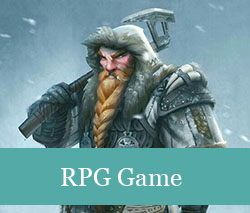
<style>
.page{position:relative;width:250px;height:213px}
.page>*{position:absolute;margin:0}
.t1{font:25px "Georgia";color:#ffffff}
</style>
<div class="page">
<p class="t1" style="left:61px;top:168px;width:121px;height:18px">RPG Game</p>
</div>
